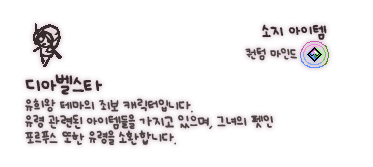
<style>
.page{position:relative;width:373px;height:167px;background:#ffffff}
.page>*{position:absolute;margin:0}
.t1{font:12px "UhBeeSe_hyunBold";color:#372b2d}
.t2{font:12px "UhBeeSe_hyunBold";letter-spacing:-0.1em;color:#372b2d}
.t3{font:10px "UhBeeSe_hyunBold";color:#4c4442}
.t4{font:10px "UhBeeSe_hyunBold";letter-spacing:-0.1em;color:#4c4442}
.t5{font:11px/16px "UhBeeSe_hyunBold";letter-spacing:-0.025em;color:#4c4442}
.t6{font:16px/23px "UhBeeSe_hyunBold";color:#372b2d}
.t7{font:16px/23px "UhBeeSe_hyunBold";letter-spacing:-0.125em;color:#372b2d}
.t8{font:16px/23px "UhBeeSe_hyunBold";letter-spacing:-0.05em;color:#372b2d}
.t9{font:16px/23px "UhBeeSe_hyunBold";letter-spacing:-0.1em;color:#372b2d}
.t10{font:11px/16px "UhBeeSe_hyunBold";letter-spacing:-0.15em;color:#4c4442}
</style>
<div class="page">
<p class="t1" style="left:262px;top:24px;width:65px;height:16px"><span class="t2">소</span>지 아이템</p>
<p class="t3" style="left:245px;top:47px;width:52px;height:14px">퀀텀 <span class="t4">마</span>인드</p>
<p class="t5" style="left:25px;top:74px;width:248px;height:72px"><span class="t6">디</span><span class="t7">아</span><span class="t8">벨</span><span class="t9">스</span><span class="t6">타<br></span>유희왕 테마의 죄보 캐릭터입니다.<br>유령 관련된 아이템들을 가지고 있으며, 그녀의 펫인<br>포르푸스 또한 유령을 <span class="t10">소</span>환합니다.</p>
</div>
